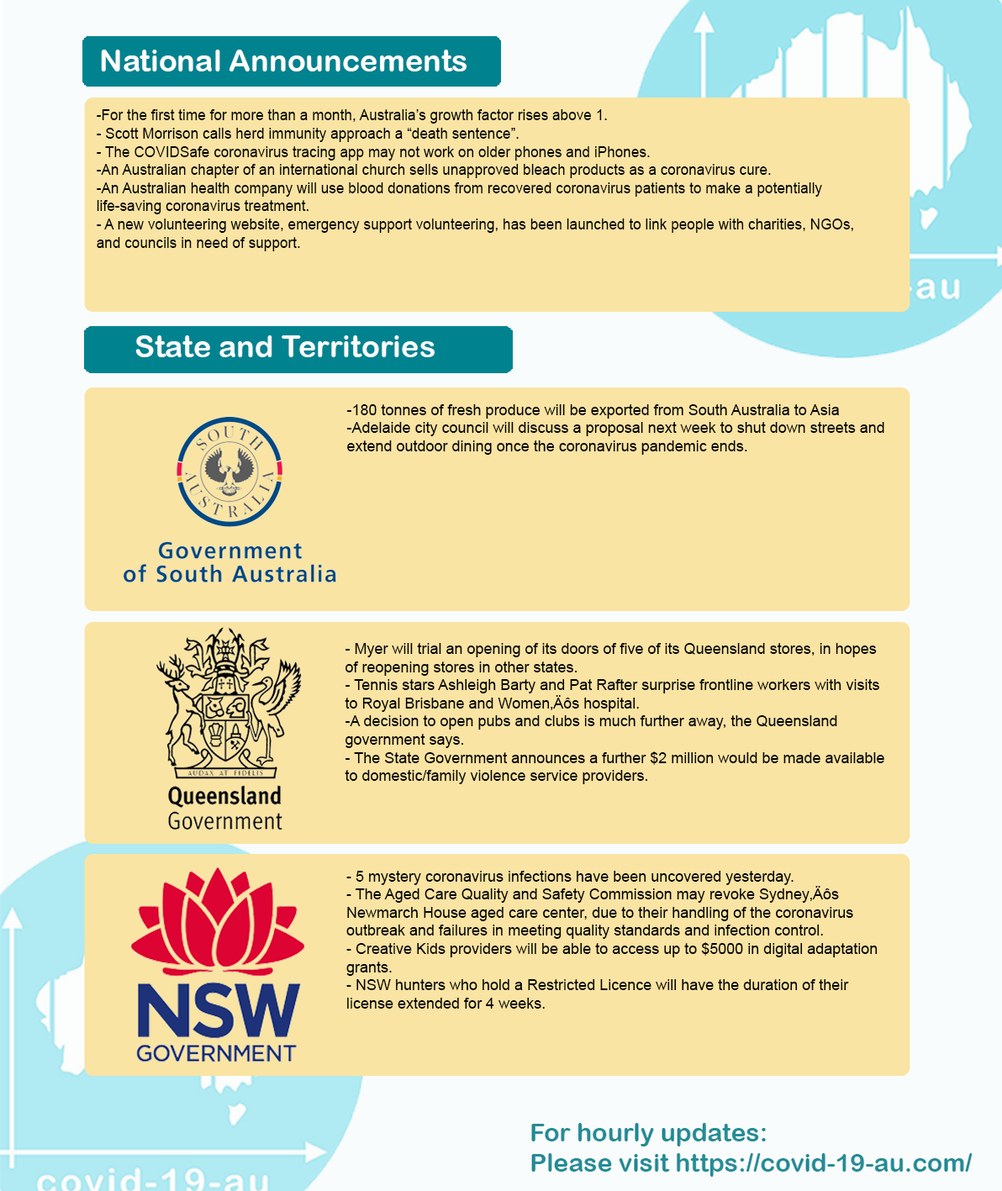
<style>
.page{position:relative;width:1002px;height:1191px;background:#f9e4a3}
.page>*{position:absolute;margin:0}
.t1{font:30.2px "ArialRoundedMTBold";color:#ffffff}
.t2{font:15.1px "ArialMT";color:#020202;scale:0.96 1}
.t3{font:30.2px "ArialRoundedMTBold";color:#f8fbfb}
.t4{font:15.1px "ArialMT";color:#020202}
</style>
<div class="page">
<p class="t1" style="left:101px;top:50px;width:365px;height:21px">National Announcements</p>
<p class="t2" style="left:97px;top:109px;width:756px;height:142px">-For the first time for more than a month, Australia’s growth factor rises above 1. <br>- Scott Morrison calls herd immunity approach a “death sentence”. <br>- The COVIDSafe coronavirus tracing app may not work on older phones and iPhones. <br>-An Australian chapter of an international church sells unapproved bleach products as a coronavirus cure. <br>-An Australian health company will use blood donations from recovered coronavirus patients to make a potentially life-saving coronavirus treatment. <br>- A new volunteering website, emergency support volunteering, has been launched to link people with charities, NGOs, and councils in need of support.</p>
<p class="t3" style="left:135px;top:335px;width:299px;height:22px">State and Territories</p>
<p class="t4" style="left:347px;top:404px;width:537px;height:51px">-180 tonnes of fresh produce will be exported from South Australia to Asia <br>-Adelaide city council will discuss a proposal next week to shut down streets and extend outdoor dining once the coronavirus pandemic ends.</p>
<p class="t4" style="left:344px;top:643px;width:540px;height:141px">- Myer will trial an opening of its doors of five of its Queensland stores, in hopes of reopening stores in other states.<br>- Tennis stars Ashleigh Barty and Pat Rafter surprise frontline workers with visits to Royal Brisbane and Women‚Äôs hospital. <br>-A decision to open pubs and clubs is much further away, the Queensland government says. <br>- The State Government announces a further $2 million would be made available to domestic/family violence service providers.</p>
<p class="t4" style="left:346px;top:870px;width:531px;height:138px">- 5 mystery coronavirus infections have been uncovered yesterday. <br>- The Aged Care Quality and Safety Commission may revoke Sydney‚Äôs Newmarch House aged care center, due to their handling of the coronavirus outbreak and failures in meeting quality standards and infection control. <br>- Creative Kids providers will be able to access up to $5000 in digital adaptation grants. <br>- NSW hunters who hold a Restricted Licence will have the duration of their license extended for 4 weeks.</p>
</div>
